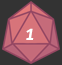
<style>
.page{position:relative;width:62px;height:65px;background:#333333}
.page>*{position:absolute;margin:0}
.t1{font:16px "Bitter-BoldItalic";color:#ffffff}
</style>
<div class="page">
<p class="t1" style="left:26px;top:28px;width:8px;height:12px">1</p>
</div>
